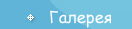
<style>
.page{position:relative;width:132px;height:29px;background:#60b4d8}
.page>*{position:absolute;margin:0}
.t1{font:16px "ComicSansMS";color:#ffffff}
</style>
<div class="page">
<p class="t1" style="left:50px;top:10px;width:61px;height:18px">Галерея</p>
</div>
